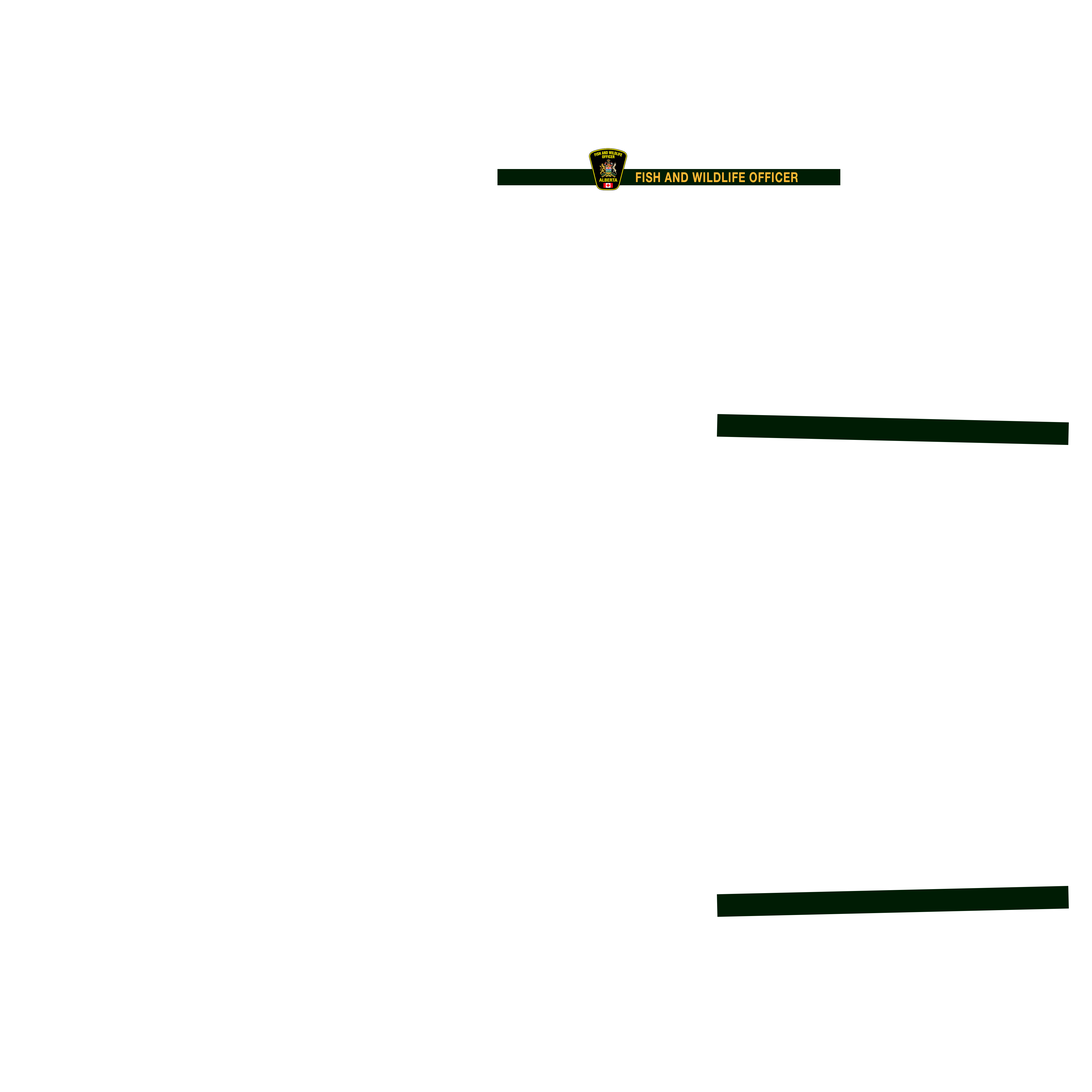
<style>
.page{position:relative;width:1092px;height:1092px;background:#ffffff}
.page>*{position:absolute;margin:0}
.t1{font:13.7px "HelveticaNeue-Bold";letter-spacing:0.05em;color:#feba35;scale:0.76 1}
</style>
<div class="page">
<p class="t1" style="left:636px;top:172px;width:162px;height:10px">FISH AND WILDLIFE OFFICER</p>
</div>
